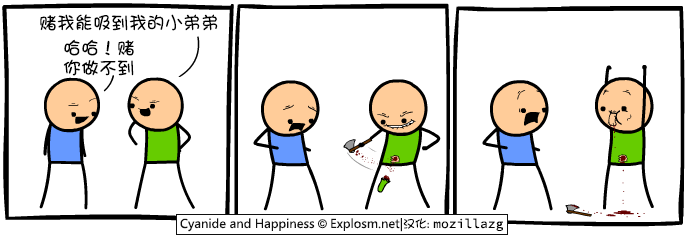
<style>
.page{position:relative;width:690px;height:240px;background:#ffffff}
.page>*{position:absolute;margin:0}
.t1{font:18px "DFGirl";color:#000000}
.t2{font:18px/20px "DFGirl";color:#000000}
</style>
<div class="page">
<p class="t1" style="left:40px;top:14px;width:178px;height:17px">赌我能吸到我的小弟弟</p>
<p class="t2" style="left:63px;top:39px;width:71px;height:37px">哈哈！赌<br>你做不到</p>
</div>
